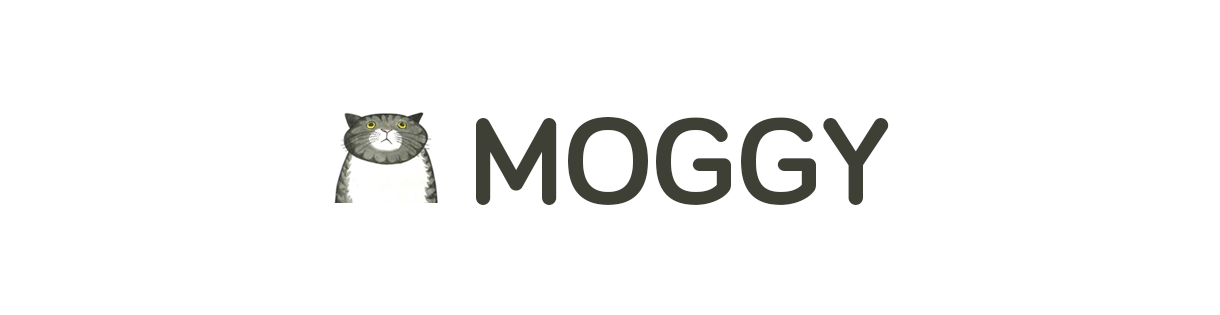
<style>
.page{position:relative;width:1220px;height:315px;background:#ffffff}
.page>*{position:absolute;margin:0}
.t1{font:216.3px "Bariol-Bold";color:#3e4036}
</style>
<div class="page">
<p class="t1" style="left:476px;top:117px;width:413px;height:88px">MOGGY</p>
</div>
